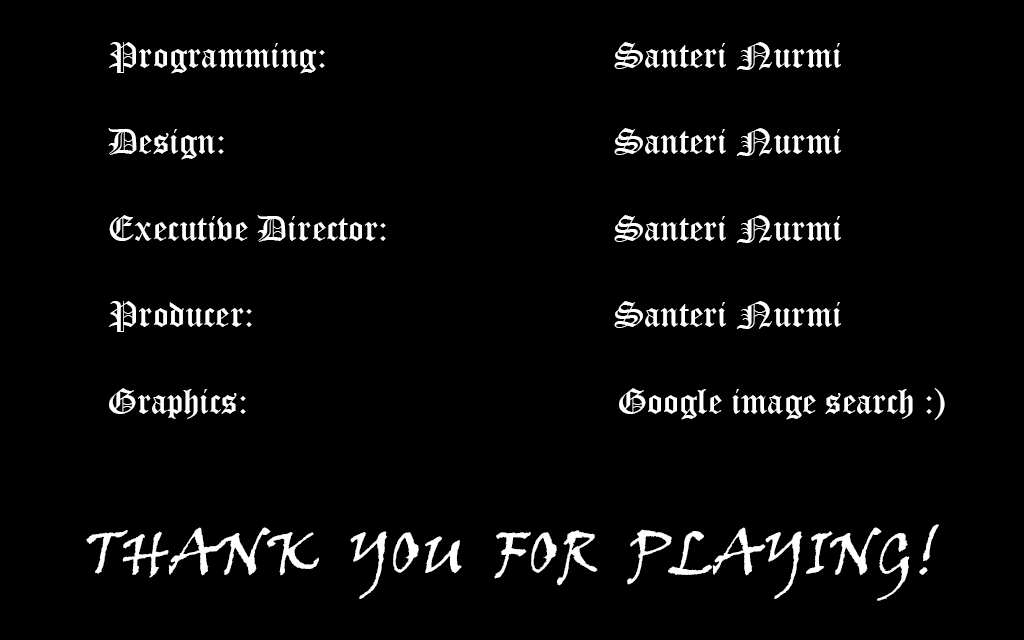
<style>
.page{position:relative;width:1024px;height:640px;background:#000000}
.page>*{position:absolute;margin:0}
.t1{font:36px "OldEnglishTextMT";color:#ffffff}
.t2{font:60px "VinerHandITC";color:#ffffff}
</style>
<div class="page">
<p class="t1" style="left:86px;top:42px;width:859px;height:559px;text-align:center">Programming:    Santeri Nurmi<br><br>   Design:       Santeri Nurmi<br><br>   Executive Director:  Santeri Nurmi<br><br>   Producer:     Santeri Nurmi<br><br>   Graphics:         Google image search :)<br><br><br><span class="t2">THANK  YOU  FOR  PLAYING!</span></p>
</div>
